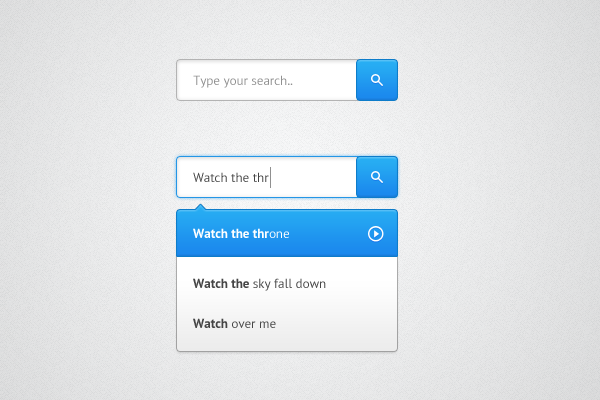
<style>
.page{position:relative;width:600px;height:400px}
.page>*{position:absolute;margin:0}
.t1{font:13px "PTSans-Regular";color:#919191}
.t2{font:13px "PTSans-Regular";color:#454545}
.t3{font:13px "PTSans-Bold";color:#ffffff}
.t4{font:13px "PTSans-Regular";color:#ffffff}
.t5{font:13px "PTSans-Bold";color:#454545}
</style>
<div class="page">
<p class="t1" style="left:193px;top:75px;width:100px;height:13px">Type your search..</p>
<p class="t2" style="left:193px;top:172px;width:76px;height:10px">Watch the thr</p>
<p class="t3" style="left:193px;top:228px;width:96px;height:10px">Watch the thr<span class="t4">one</span></p>
<p class="t2" style="left:193px;top:278px;width:133px;height:13px"><span class="t5">Watch the </span>sky fall down</p>
<p class="t2" style="left:193px;top:318px;width:83px;height:10px"><span class="t5">Watch </span>over me</p>
</div>
